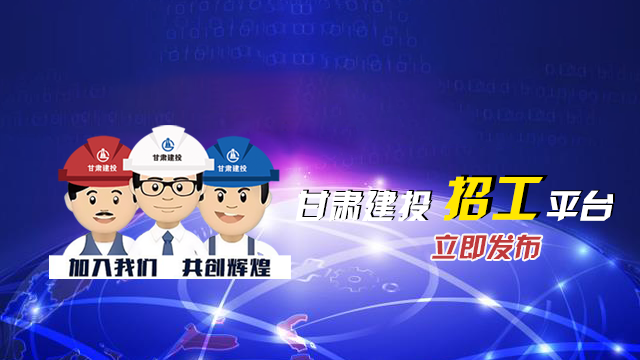
<style>
.page{position:relative;width:640px;height:360px}
.page>*{position:absolute;margin:0}
.t1{font:48px "JLinXin";letter-spacing:0.04em;color:#ffe700;font-style:italic}
.t2{font:10px "JLinXin";letter-spacing:0.04em;color:#ffffff;font-style:italic}
.t3{font:33px "JLinXin";letter-spacing:0.04em;color:#ffffff;font-style:italic}
.t4{font:26.5px "JLinXin";letter-spacing:0.04em;color:#bf393b;font-style:italic}
</style>
<div class="page">
<p class="t1" style="left:443px;top:176px;width:100px;height:45px"><span class="t2"> </span>招工</p>
<p class="t3" style="left:295px;top:190px;width:318px;height:32px">甘肃建投      平台</p>
<p class="t4" style="left:432px;top:234px;width:110px;height:26px">立即发布</p>
</div>
